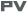
<style>
.page{position:relative;width:28px;height:12px;background:#ffffff}
.page>*{position:absolute;margin:0}
.t1{font:14.7px "FOTBullheadedBold";color:#525a5c;font-weight:bold;scale:1.12 1}
</style>
<div class="page">
<p class="t1" style="left:1px;top:1px;width:26px;height:11px">PV</p>
</div>
